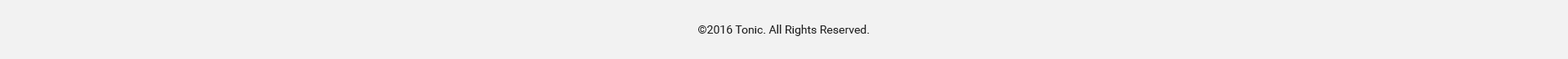
<style>
.page{position:relative;width:1568px;height:59px;background:#f2f2f2}
.page>*{position:absolute;margin:0}
.t1{font:11.4px "Roboto-Regular";color:#212121}
</style>
<div class="page">
<p class="t1" style="left:698px;top:24px;width:171px;height:12px">©2016 Tonic. All Rights Reserved.</p>
</div>
